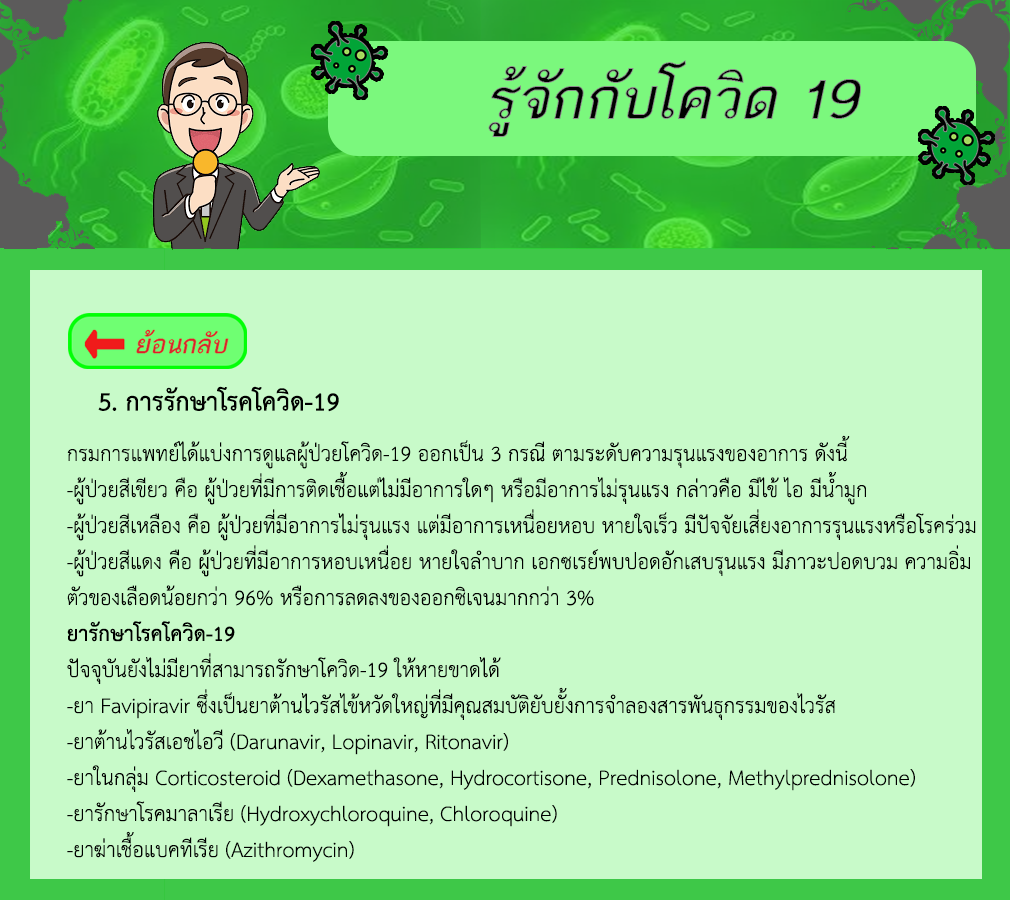
<style>
.page{position:relative;width:1010px;height:900px;background:#c8fac9}
.page>*{position:absolute;margin:0}
.t1{font:36px "THSarabunPSK-Bold";color:#000000}
.t2{font:30px "THSarabunPSK";color:#000000}
.t3{font:30px "THSarabunPSK-Bold";color:#000000}
</style>
<div class="page">
<p class="t1" style="left:98px;top:386px;width:241px;height:26px">5. การรักษาโรคโควิด-19</p>
<p class="t2" style="left:67px;top:435px;width:909px;height:427px">กรมการแพทย์ได้แบ่งการดูแลผู้ป่วยโควิด-19 ออกเป็น 3 กรณี ตามระดับความรุนแรงของอาการ ดังนี้<br>-ผู้ป่วยสีเขียว คือ ผู้ป่วยที่มีการติดเชื้อแต่ไม่มีอาการใดๆ หรือมีอาการไม่รุนแรง กล่าวคือ มีไข้ ไอ มีน้ำมูก<br>-ผู้ป่วยสีเหลือง คือ ผู้ป่วยที่มีอาการไม่รุนแรง แต่มีอาการเหนื่อยหอบ หายใจเร็ว มีปัจจัยเสี่ยงอาการรุนแรงหรือโรคร่วม<br>-ผู้ป่วยสีแดง คือ ผู้ป่วยที่มีอาการหอบเหนื่อย หายใจลำบาก เอกซเรย์พบปอดอักเสบรุนแรง มีภาวะปอดบวม ความอิ่ม<br>ตัวของเลือดน้อยกว่า 96% หรือการลดลงของออกซิเจนมากกว่า 3% <br><span class="t3">ยารักษาโรคโควิด-19<br></span>ปัจจุบันยังไม่มียาที่สามารถรักษาโควิด-19 ให้หายขาดได้<br>-ยา Favipiravir ซึ่งเป็นยาต้านไวรัสไข้หวัดใหญ่ที่มีคุณสมบัติยับยั้งการจำลองสารพันธุกรรมของไวรัส<br>-ยาต้านไวรัสเอชไอวี (Darunavir, Lopinavir, Ritonavir)<br>-ยาในกลุ่ม Corticosteroid (Dexamethasone, Hydrocortisone, Prednisolone, Methylprednisolone)<br>-ยารักษาโรคมาลาเรีย (Hydroxychloroquine, Chloroquine)<br>-ยาฆ่าเชื้อแบคทีเรีย (Azithromycin)</p>
</div>
